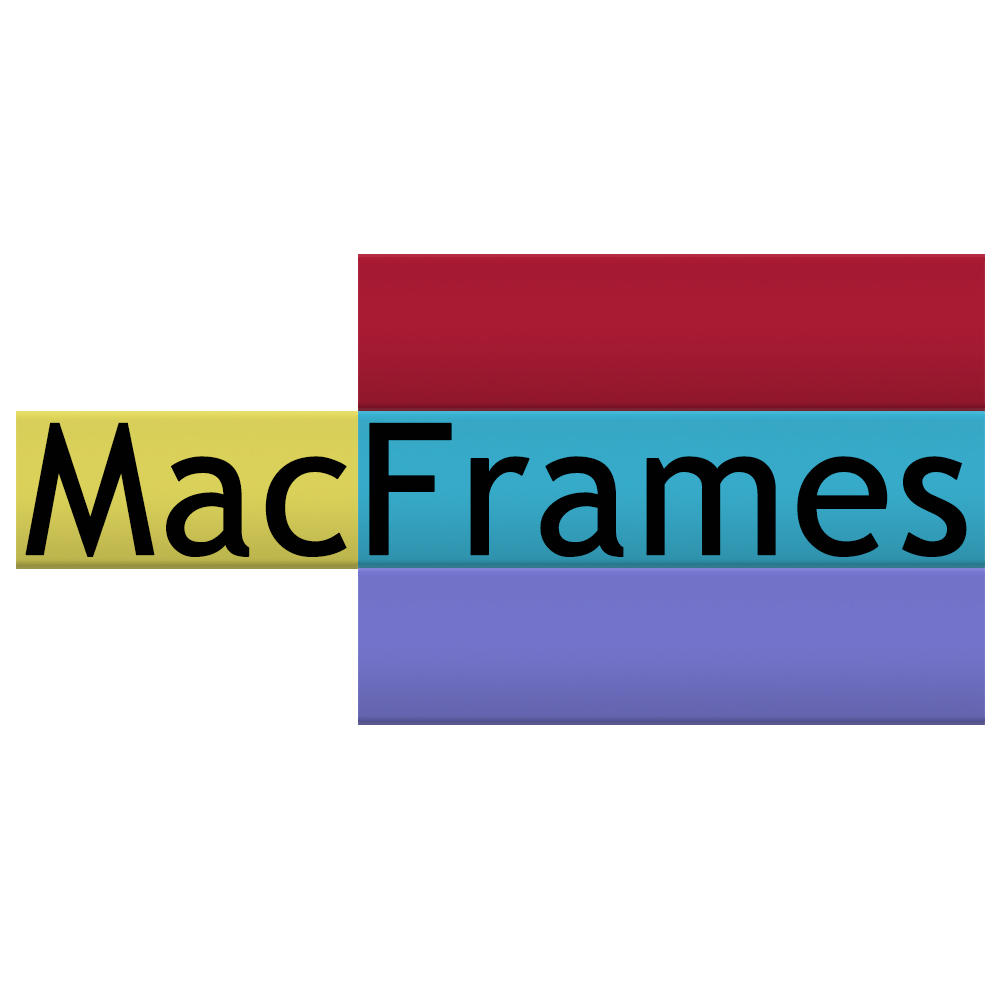
<style>
.page{position:relative;width:1000px;height:1000px;background:#ffffff}
.page>*{position:absolute;margin:0}
.t1{font:183.3px "TrebuchetMS";color:#010101;font-weight:bold}
</style>
<div class="page">
<p class="t1" style="left:25px;top:422px;width:942px;height:135px">MacFrames</p>
</div>
